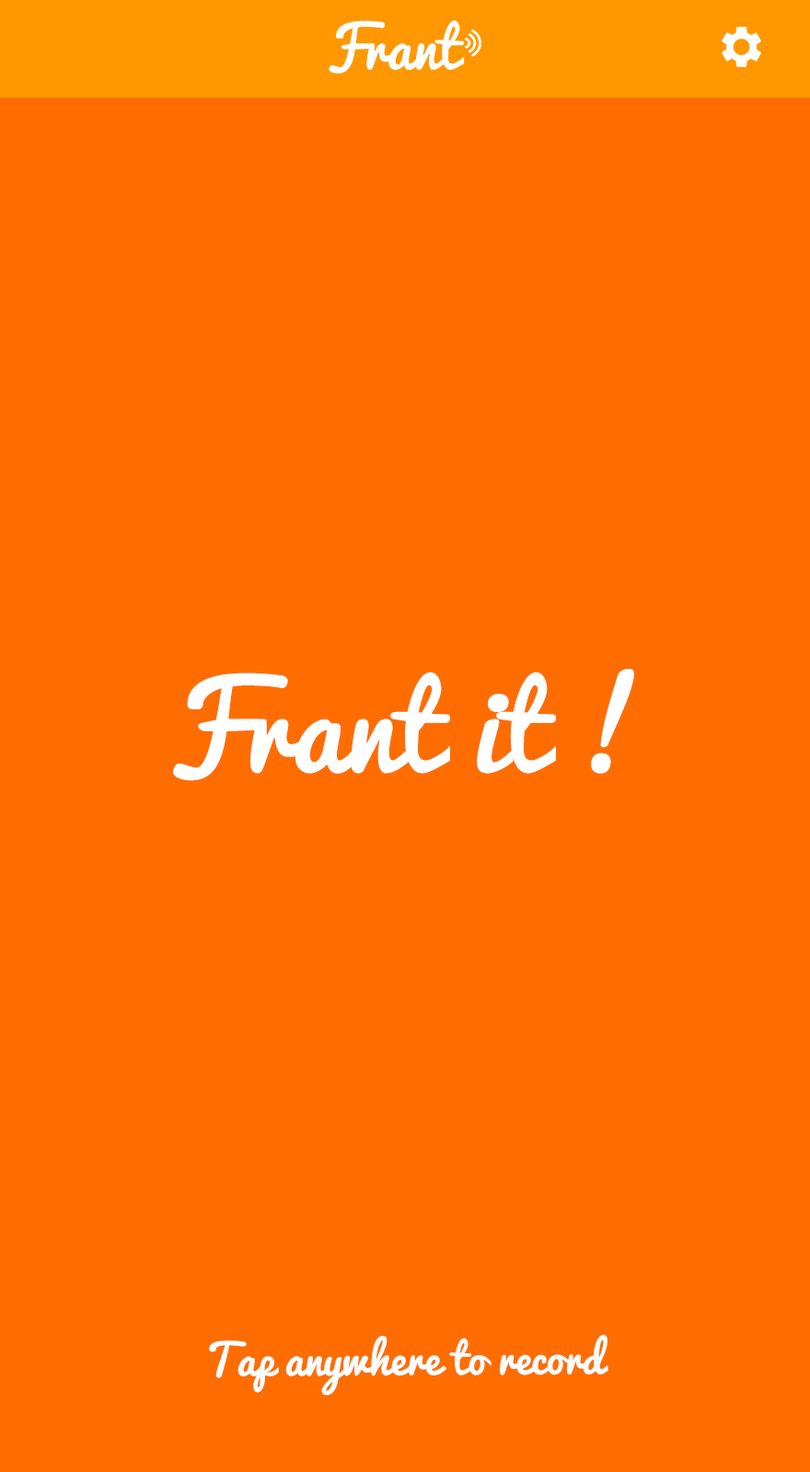
<style>
.page{position:relative;width:810px;height:1472px;background:#ff6d00}
.page>*{position:absolute;margin:0}
.t1{font:115px "Pacifico-Regular";color:#ffffff}
.t2{font:42.2px "Pacifico-Regular";color:#ffffff}
</style>
<div class="page">
<p class="t1" style="left:173px;top:669px;width:461px;height:112px">Frant it !</p>
<p class="t2" style="left:209px;top:1334px;width:399px;height:62px">Tap anywhere to record</p>
</div>
